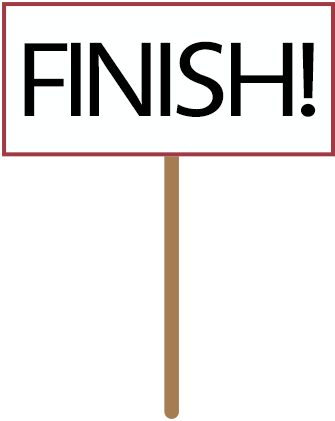
<style>
.page{position:relative;width:335px;height:421px;background:#ffffff}
.page>*{position:absolute;margin:0}
.t1{font:106.3px "Vegur-Regular";letter-spacing:-0.06em;color:#000000;scale:1.1 1}
</style>
<div class="page">
<p class="t1" style="left:24px;top:41px;width:292px;height:76px">FINISH!</p>
</div>
